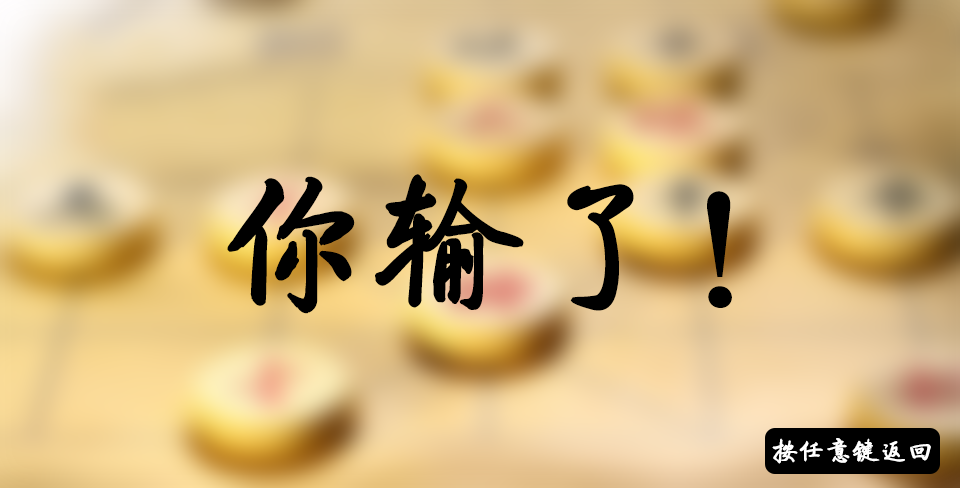
<style>
.page{position:relative;width:960px;height:488px}
.page>*{position:absolute;margin:0}
.t1{font:150px "FZQTJW--GB1-0";color:#000000;font-weight:bold}
.t2{font:26.5px "FZQTJW--GB1-0";color:#ffffff;font-weight:bold}
</style>
<div class="page">
<p class="t1" style="left:227px;top:174px;width:505px;height:140px">你输了！</p>
<p class="t2" style="left:772px;top:438px;width:159px;height:26px">按任意键返回</p>
</div>
